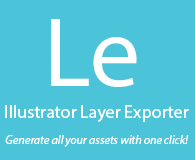
<style>
.page{position:relative;width:195px;height:160px;background:#4bc4d9}
.page>*{position:absolute;margin:0}
.t1{font:100px "MyriadPro-Regular";color:#ffffff}
.t2{font:18px "MyriadPro-Regular";color:#ffffff}
.t3{font:12px "MyriadPro-It";color:#ffffff}
</style>
<div class="page">
<p class="t1" style="left:51px;top:19px;width:86px;height:68px">Le</p>
<p class="t2" style="left:5px;top:105px;width:184px;height:17px">Illustrator Layer Exporter</p>
<p class="t3" style="left:5px;top:135px;width:184px;height:12px">Generate all your assets with one click!</p>
</div>
